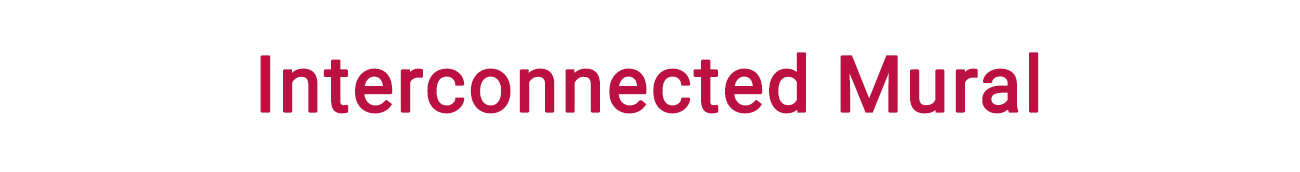
<style>
.page{position:relative;width:1300px;height:172px;background:#ffffff}
.page>*{position:absolute;margin:0}
.t1{font:77.6px "Roboto-Regular";letter-spacing:0.01em;color:#bc0f42;font-weight:bold}
</style>
<div class="page">
<p class="t1" style="left:260px;top:52px;width:779px;height:62px">Interconnected Mural</p>
</div>
